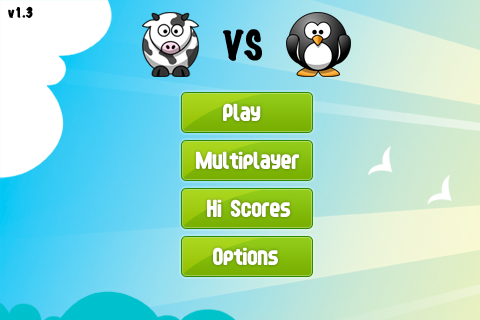
<style>
.page{position:relative;width:480px;height:320px}
.page>*{position:absolute;margin:0}
.t1{font:12.1px "MarkerFelt-Wide";color:#000000;font-weight:bold}
.t2{font:36.2px "MarkerFelt-Thin";color:#000000;font-weight:bold}
.t3{font:22px "FontopoFONTOPO";color:#ffffff}
</style>
<div class="page">
<p class="t1" style="left:8px;top:6px;width:25px;height:12px">v1.3</p>
<p class="t2" style="left:223px;top:29px;width:39px;height:32px">VS</p>
<p class="t3" style="left:223px;top:103px;width:38px;height:18px">Play</p>
<p class="t3" style="left:196px;top:151px;width:103px;height:18px">Multiplayer</p>
<p class="t3" style="left:207px;top:199px;width:84px;height:18px">Hi Scores</p>
<p class="t3" style="left:213px;top:247px;width:65px;height:18px">Options</p>
</div>
